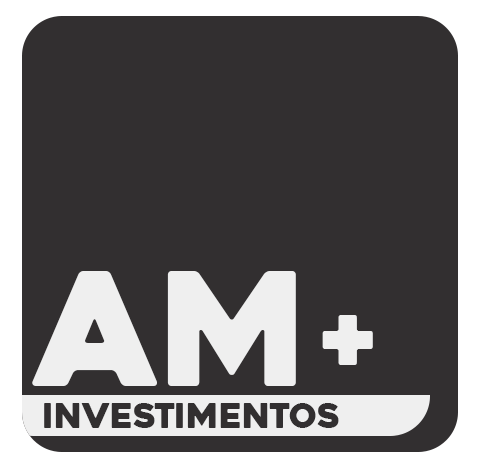
<style>
.page{position:relative;width:496px;height:468px;background:#322f30}
.page>*{position:absolute;margin:0}
.t1{font:156.5px "Heavitas";color:#efefef}
.t2{font:95.5px "Heavitas";color:#efefef}
.t3{font:33.6px "Heavitas";color:#322f30}
</style>
<div class="page">
<p class="t1" style="left:32px;top:271px;width:264px;height:115px">aM</p>
<p class="t2" style="left:322px;top:315px;width:51px;height:50px">+</p>
<p class="t3" style="left:44px;top:403px;width:295px;height:25px">investimentos</p>
</div>
